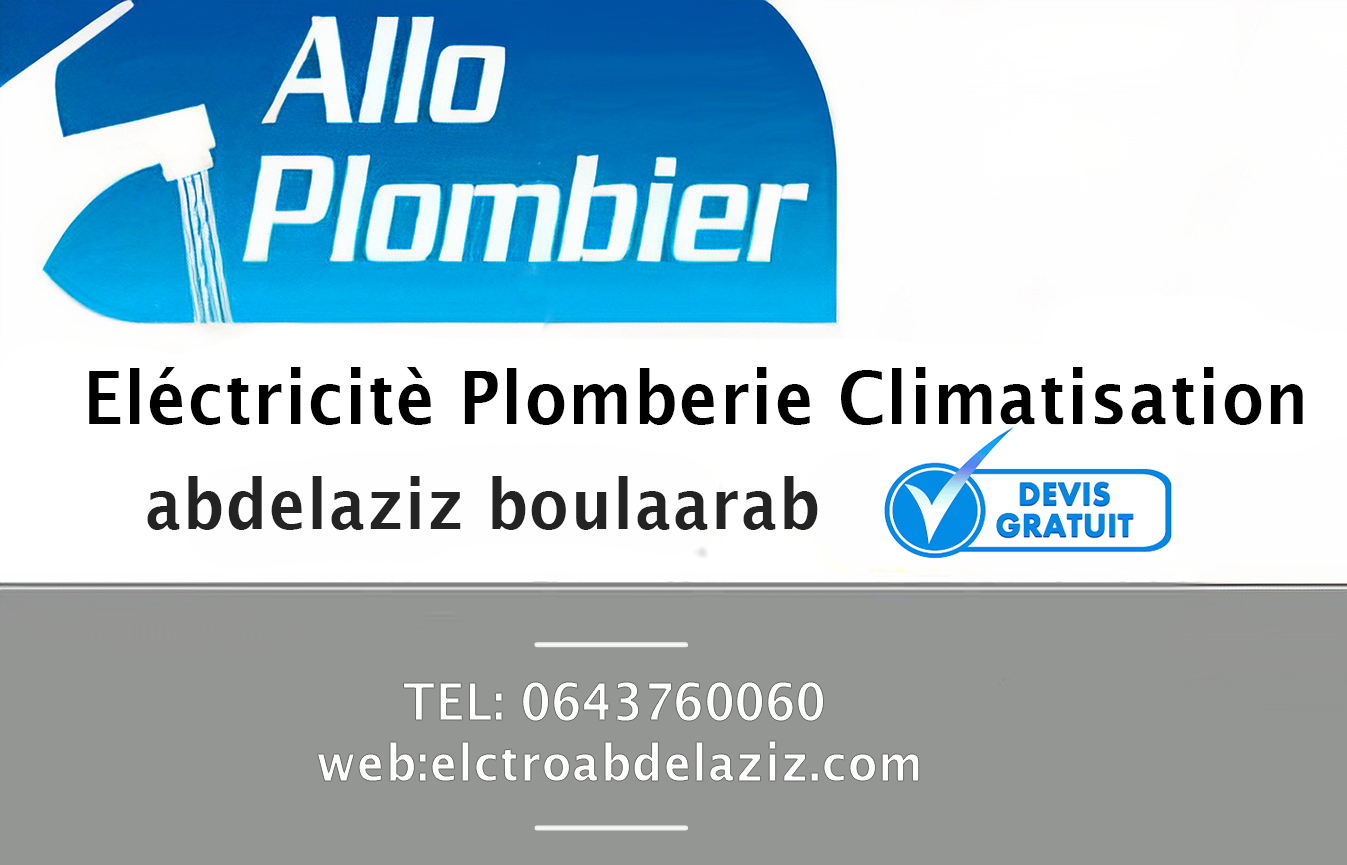
<style>
.page{position:relative;width:1347px;height:865px;background:#949693}
.page>*{position:absolute;margin:0}
.t1{font:73.2px "LucidaSans-Demi";letter-spacing:0.026em;color:#000000;scale:0.9 1}
.t2{font:69px "LucidaSans-Demi";letter-spacing:0.026em;color:#232323;scale:0.9 1}
.t3{font:51.1px "LucidaSans-Demi";letter-spacing:0.026em;color:#ffffff;scale:0.9 1}
</style>
<div class="page">
<p class="t1" style="left:89px;top:367px;width:1214px;height:58px">Eléctricitè Plomberie Climatisation</p>
<p class="t2" style="left:147px;top:476px;width:671px;height:54px">abdelaziz boulaarab</p>
<p class="t3" style="left:403px;top:682px;width:421px;height:39px">TEL: 0643760060</p>
<p class="t3" style="left:317px;top:741px;width:602px;height:40px">web:elctroabdelaziz.com</p>
</div>
